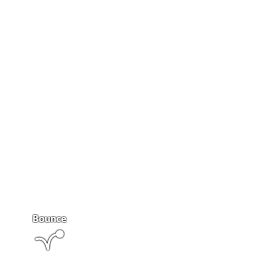
<style>
.page{position:relative;width:256px;height:256px;background:#ffffff}
.page>*{position:absolute;margin:0}
.t1{font:11px "Calibri-Bold";color:#ffffff}
</style>
<div class="page">
<p class="t1" style="left:33px;top:215px;width:34px;height:7px">Bounce</p>
</div>
